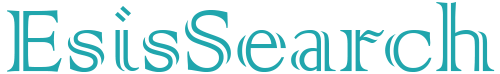
<style>
.page{position:relative;width:500px;height:74px;background:#ffffff}
.page>*{position:absolute;margin:0}
.t1{font:116px "ColonnaMT";color:#21a6ad}
</style>
<div class="page">
<p class="t1" style="left:7px;top:2px;width:488px;height:70px">EsisSearch</p>
</div>
